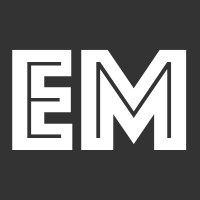
<style>
.page{position:relative;width:200px;height:200px;background:#333333}
.page>*{position:absolute;margin:0}
.t1{font:150px "Phosphate-Inline";color:#ffffff}
</style>
<div class="page">
<p class="t1" style="left:12px;top:49px;width:175px;height:101px">EM</p>
</div>
